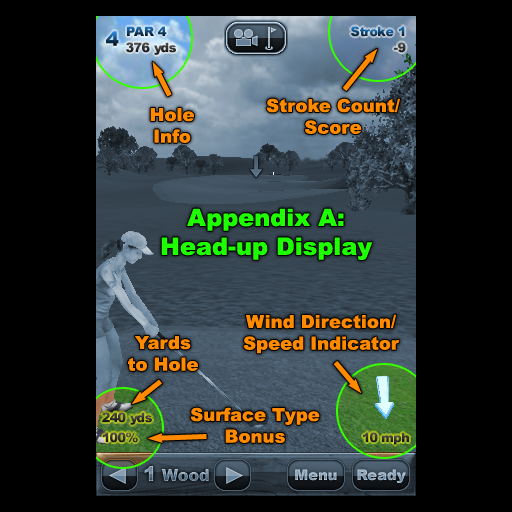
<style>
.page{position:relative;width:512px;height:512px;background:#000000}
.page>*{position:absolute;margin:0}
.t1{font:18px "Arial-Black";color:#ff8a00}
.t2{font:24px "Arial-Black";color:#1eff00}
</style>
<div class="page">
<p class="t1" style="left:266px;top:98px;width:134px;height:36px;text-align:center">Stroke Count/<br>Score</p>
<p class="t1" style="left:150px;top:108px;width:44px;height:35px;text-align:center">Hole<br>Info</p>
<p class="t2" style="left:161px;top:208px;width:212px;height:52px;text-align:center">Appendix A:<br>Head-up Display</p>
<p class="t1" style="left:243px;top:314px;width:157px;height:40px;text-align:center">Wind Direction/<br>Speed Indicator</p>
<p class="t1" style="left:128px;top:336px;width:70px;height:35px;text-align:center">Yards<br>to Hole</p>
<p class="t1" style="left:190px;top:407px;width:130px;height:36px;text-align:center">Surface Type<br>Bonus</p>
</div>
